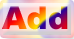
<style>
.page{position:relative;width:74px;height:39px}
.page>*{position:absolute;margin:0}
.t1{font:31.8px "Arial-Black"}
</style>
<div class="page">
<p class="t1" style="left:2px;top:6px;width:66px;height:24px">Add</p>
</div>
